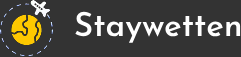
<style>
.page{position:relative;width:241px;height:57px;background:#333333}
.page>*{position:absolute;margin:0}
.t1{font:33px "JosefinSans-SemiBold";color:#ffffff}
</style>
<div class="page">
<p class="t1" style="left:75px;top:11px;width:166px;height:32px">Staywetten</p>
</div>
